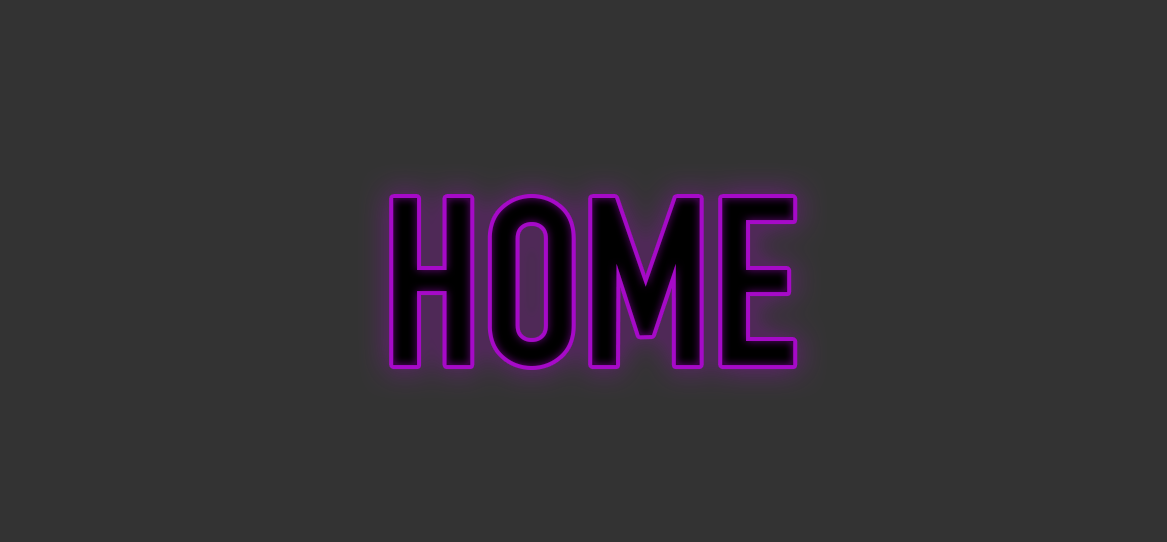
<style>
.page{position:relative;width:1167px;height:542px;background:#333333}
.page>*{position:absolute;margin:0}
.t1{font:233.7px "DINEngschrift";color:#070008}
</style>
<div class="page">
<p class="t1" style="left:393px;top:198px;width:401px;height:168px">HOME</p>
</div>
